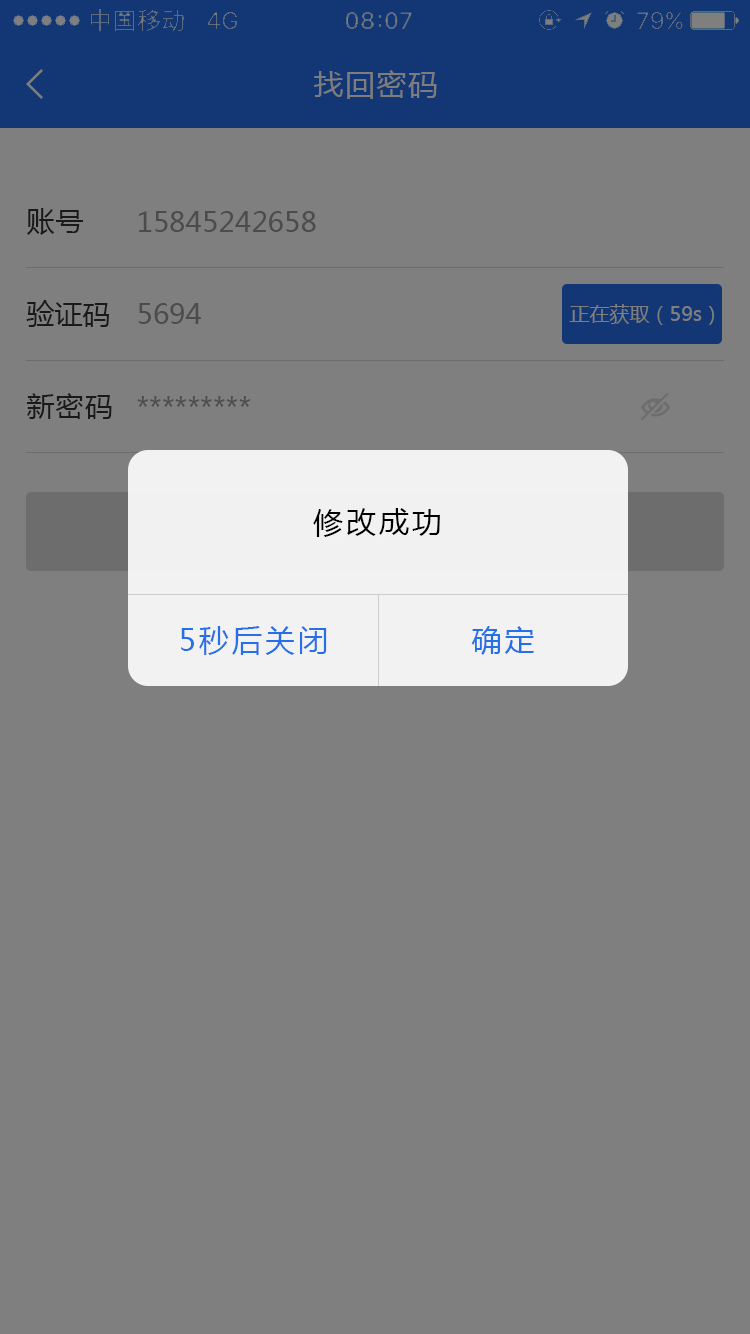
<style>
.page{position:relative;width:750px;height:1334px;background:#7f7f7f}
.page>*{position:absolute;margin:0}
.t1{font:30px "MicrosoftYaHei";letter-spacing:0.05em;color:#7d7d7d}
.t2{font:28px "MicrosoftYaHei";letter-spacing:0.05em;color:#191919}
.t3{font:28px "MicrosoftYaHei";color:#4c4c4c}
.t4{font:28px "MicrosoftYaHei";color:#191919}
.t5{font:20px "MicrosoftYaHei";color:#7f7f7f}
.t6{font:30px "MicrosoftYaHei";letter-spacing:0.1em;color:#000000}
.t7{font:30px "MicrosoftYaHei";letter-spacing:0.1em;color:#256fe9}
</style>
<div class="page">
<p class="t1" style="left:314px;top:70px;width:123px;height:29px">找回密码</p>
<p class="t2" style="left:26px;top:208px;width:57px;height:27px">账号</p>
<p class="t3" style="left:139px;top:211px;width:177px;height:21px">15845242658</p>
<p class="t4" style="left:26px;top:300px;width:83px;height:27px">验证码</p>
<p class="t3" style="left:138px;top:303px;width:63px;height:21px">5694</p>
<p class="t5" style="left:569px;top:304px;width:145px;height:21px">正在获取（59s）</p>
<p class="t2" style="left:27px;top:393px;width:85px;height:26px">新密码</p>
<p class="t3" style="left:137px;top:396px;width:114px;height:11px">*********</p>
<p class="t6" style="left:313px;top:508px;width:127px;height:29px">修改成功</p>
<p class="t7" style="left:181px;top:626px;width:146px;height:29px">5秒后关闭</p>
<p class="t7" style="left:471px;top:626px;width:63px;height:29px">确定</p>
</div>
